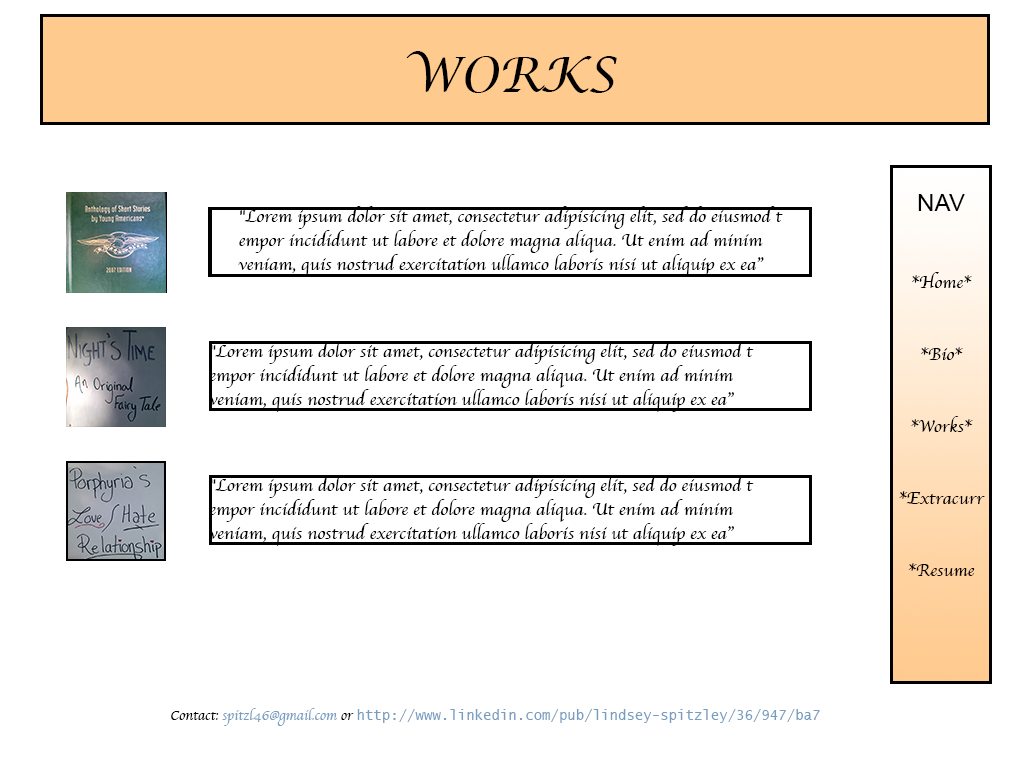
<style>
.page{position:relative;width:1024px;height:768px;background:#ffffff}
.page>*{position:absolute;margin:0}
.t1{font:48px "LucidaCalligraphy-Italic";color:#000000;text-transform:uppercase}
.t2{font:18px/24px "Apple-Chancery";color:#000000}
.t3{font:24px "ArialMT";color:#000000;text-transform:uppercase}
.t4{font:14px/24px "LucidaSans-Typewriter";color:#779dc1}
.t5{font:24px/24px "Apple-Chancery";color:#000000}
.t6{font:14px/24px "Apple-Chancery";color:#000000}
.t7{font:14px/24px "Apple-Chancery";color:#779dc1}
</style>
<div class="page">
<p class="t1" style="left:406px;top:51px;width:211px;height:42px">Works</p>
<p class="t2" style="left:899px;top:194px;width:86px;height:382px;text-align:center"><span class="t3"><br>Nav<br><br></span><br>*Home*<br><br><br>*Bio*<br><br><br>*Works*<br><br><br>*Extracurr<br><br><br>*Resume</p>
<p class="t2" style="left:238px;top:206px;width:545px;height:71px">"Lorem ipsum dolor sit amet, consectetur adipisicing elit, sed do eiusmod t<br>empor incididunt ut labore et dolore magna aliqua. Ut enim ad minim <br>veniam, quis nostrud exercitation ullamco laboris nisi ut aliquip ex ea”</p>
<p class="t2" style="left:209px;top:341px;width:545px;height:71px">"Lorem ipsum dolor sit amet, consectetur adipisicing elit, sed do eiusmod t<br>empor incididunt ut labore et dolore magna aliqua. Ut enim ad minim <br>veniam, quis nostrud exercitation ullamco laboris nisi ut aliquip ex ea”</p>
<p class="t2" style="left:209px;top:475px;width:545px;height:71px">"Lorem ipsum dolor sit amet, consectetur adipisicing elit, sed do eiusmod t<br>empor incididunt ut labore et dolore magna aliqua. Ut enim ad minim <br>veniam, quis nostrud exercitation ullamco laboris nisi ut aliquip ex ea”</p>
<p class="t4" style="left:171px;top:708px;width:649px;height:18px"><span class="t5">                    </span><span class="t6">Contact: </span><span class="t7">spitzl46@gmail.com</span><span class="t6"> or </span>http://www.linkedin.com/pub/lindsey-spitzley/36/947/ba7 <br><span class="t2"><br><br>*Bio*<br><br><br>*Bio*<br><br><br>*Works*<br><br><br>*Resume*</span></p>
</div>
